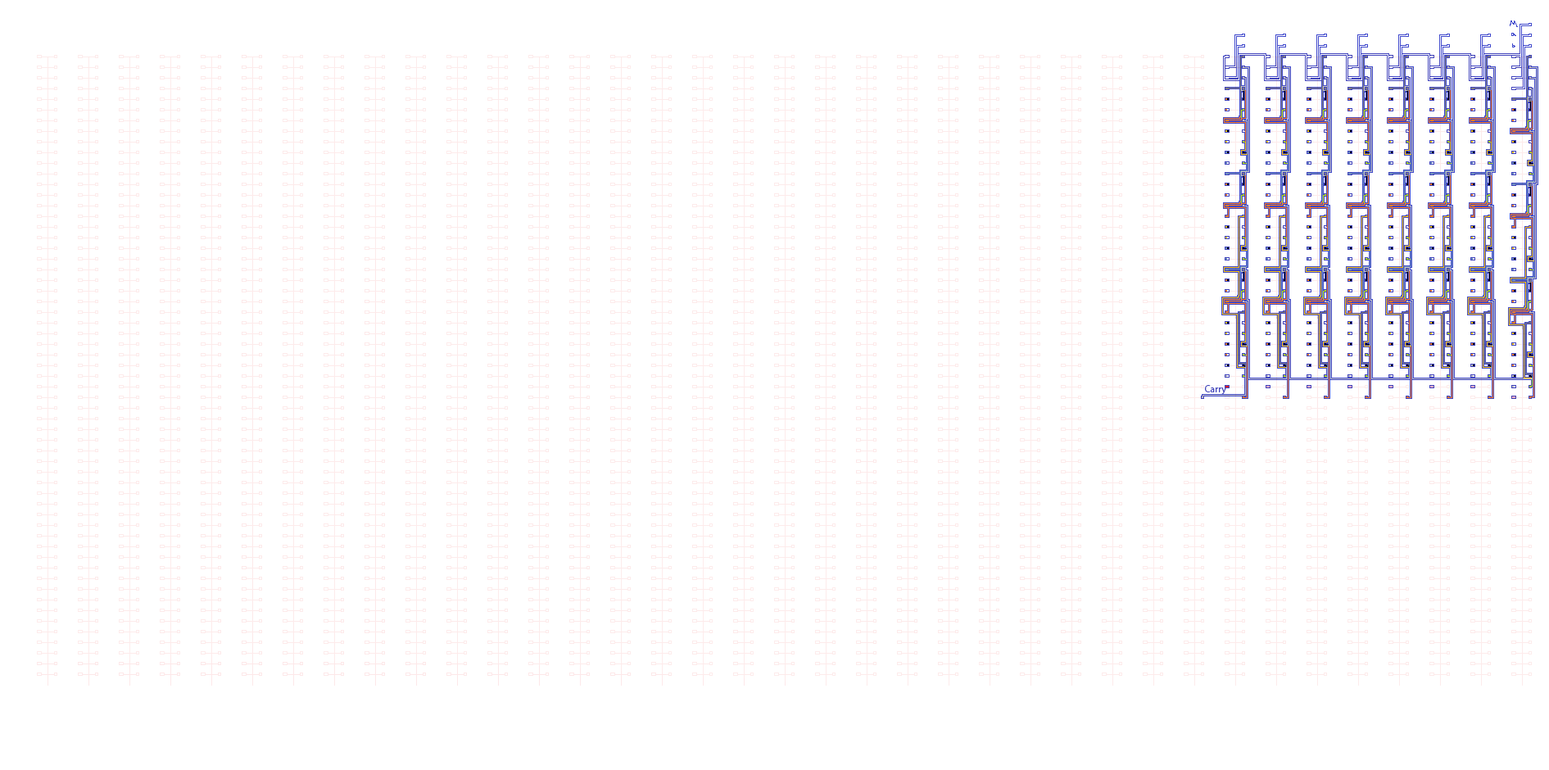
<style>
.page{position:relative;width:1549px;height:770px;background:#ffffff}
.page>*{position:absolute;margin:0}
.t1{font:9.8px "MyriadPro-Regular";color:#4043bc}
</style>
<div class="page">
<p class="t1" style="left:1205px;top:385px;width:21px;height:10px">Carry</p>
</div>
